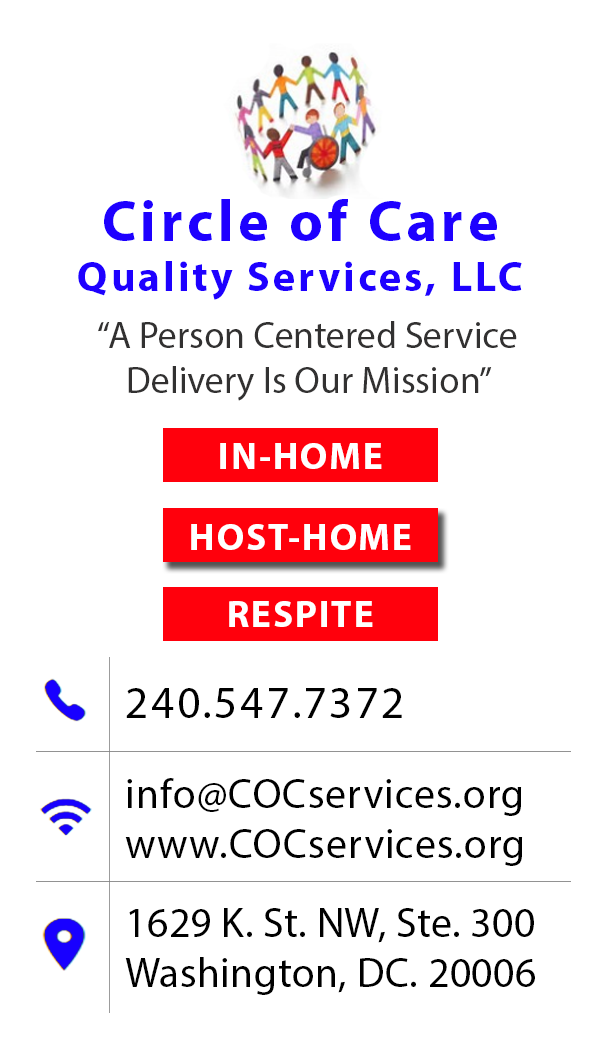
<style>
.page{position:relative;width:600px;height:1050px;background:#ffffff}
.page>*{position:absolute;margin:0}
.t1{font:41.7px/50px "MyriadPro-Bold";letter-spacing:0.075em;color:#1e00ff}
.t2{font:58.3px/50px "MyriadPro-Bold";letter-spacing:0.075em;color:#1e00ff}
.t3{font:37.5px "MyriadPro-Regular";color:#323131}
.t4{font:37.5px "MyriadPro-Bold";letter-spacing:0.05em;color:#ffffff}
.t5{font:45.8px "MyriadPro-Regular";letter-spacing:0.05em;color:#000000}
.t6{font:41.7px/50px "MyriadPro-Regular";letter-spacing:0.025em;color:#000000}
.t7{font:41.7px/50px "MyriadPro-Regular";letter-spacing:0.01em;color:#000000}
</style>
<div class="page">
<p class="t1" style="left:78px;top:199px;width:444px;height:101px;text-align:center"><span class="t2">Circle of Care<br></span>Quality Services, LLC</p>
<p class="t3" style="left:98px;top:321px;width:419px;height:80px;text-align:center">“A Person Centered Service Delivery Is Our Mission”</p>
<p class="t4" style="left:220px;top:443px;width:162px;height:26px">IN-HOME</p>
<p class="t4" style="left:191px;top:524px;width:220px;height:26px">HOST-HOME</p>
<p class="t4" style="left:229px;top:601px;width:144px;height:26px">RESPITE</p>
<p class="t5" style="left:126px;top:688px;width:276px;height:30px">240.547.7372</p>
<p class="t6" style="left:125px;top:778px;width:398px;height:88px">info@COCservices.org<br>www.COCservices.org</p>
<p class="t7" style="left:125px;top:908px;width:410px;height:87px">1629 K. St. NW, Ste. 300<br>Washington, DC. 20006</p>
</div>
